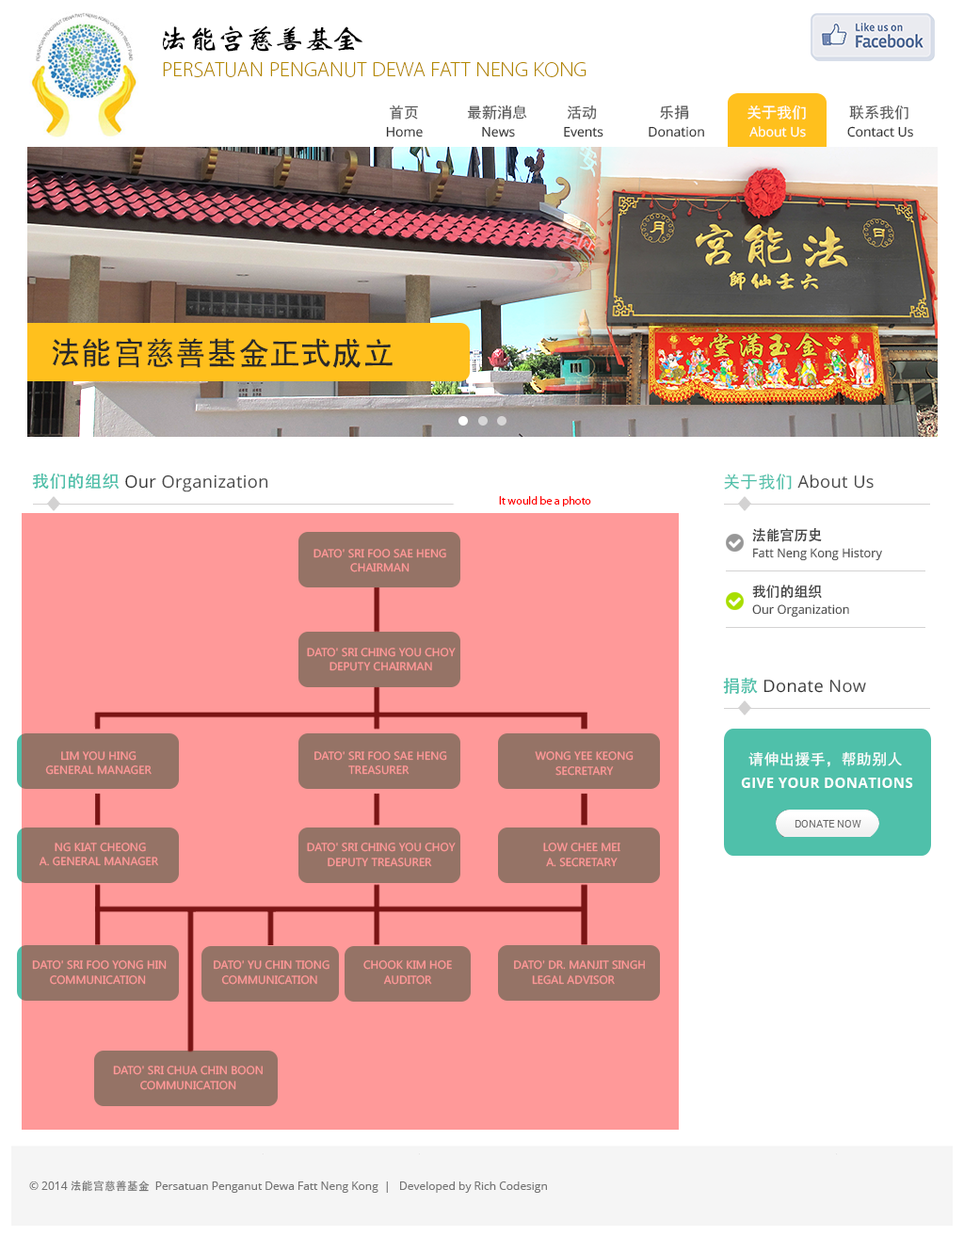
<style>
.page{position:relative;width:964px;height:1237px;background:#ffffff}
.page>*{position:absolute;margin:0}
.t1{font:29.1px "WeibeiCSEG??NÑ²ó??";letter-spacing:-0.05em;color:#000000;text-transform:uppercase;scale:1.04 1}
.t2{font:20.6px "Vegur-Light";color:#b38701;text-transform:uppercase;scale:1.03 1}
.t3{font:15.1px "SimHei";color:#5a5a5a}
.t4{font:15.1px "SimHei";color:#ffffff}
.t5{font:13.2px "OpenSans";color:#303030}
.t6{font:13.2px "OpenSans";color:#ffffff}
.t7{font:32.1px "MS-Hei";color:#292929}
.t8{font:16.9px "OpenSans";letter-spacing:0.025em;color:#474747}
.t9{font:16.9px "AdobeHeitiStd-Regular";letter-spacing:0.025em;color:#4fc0aa}
.t10{font:16.9px "OpenSans";letter-spacing:0.025em;color:#343434}
.t11{font:16.9px "SimHei";letter-spacing:0.025em;color:#4fc0aa}
.t12{font:11.3px "Myriad-Roman";color:#ff0000}
.t13{font:14.1px/56.5px "AdobeHeitiStd-Regular";color:#474747}
.t14{font:10.6px/14.6px "MicrosoftYaHei";color:#ff9999}
.t15{font:12.2px/56.5px "OpenSans";color:#474747}
.t16{font:15.1px "SimHei";letter-spacing:0.025em;color:#ffffff}
.t17{font:14.1px "OpenSans-Bold";letter-spacing:0.025em;color:#ffffff}
.t18{font:11.3px "OpenSans";color:#737373}
.t19{font:11.3px "MS-Hei";color:#737373}
</style>
<div class="page">
<p class="t1" style="left:163px;top:25px;width:199px;height:27px">法能宫慈善基金</p>
<p class="t2" style="left:163px;top:62px;width:423px;height:15px">PERSATUAN PENGANUT DEWA fatt neng kong</p>
<p class="t3" style="left:389px;top:104px;width:29px;height:16px">首页</p>
<p class="t3" style="left:467px;top:104px;width:60px;height:16px">最新消息</p>
<p class="t3" style="left:568px;top:105px;width:29px;height:15px">活动</p>
<p class="t3" style="left:660px;top:104px;width:29px;height:16px">乐捐</p>
<p class="t4" style="left:747px;top:104px;width:59px;height:16px">关于我们</p>
<p class="t3" style="left:849px;top:104px;width:59px;height:16px">联系我们</p>
<p class="t5" style="left:386px;top:126px;width:527px;height:11px">Home                 News              Events             Donation             <span class="t6">About Us </span>           Contact Us</p>
<p class="t7" style="left:52px;top:338px;width:341px;height:30px">法能宫慈善基金正式成立</p>
<p class="t8" style="left:32px;top:473px;width:236px;height:19px"><span class="t9">我们的组织</span><span class="t10"> Our </span>Organization</p>
<p class="t8" style="left:724px;top:474px;width:150px;height:16px"><span class="t11">关于我们 </span>About Us</p>
<p class="t12" style="left:499px;top:496px;width:92px;height:10px">It would be a photo</p>
<p class="t13" style="left:752px;top:528px;width:70px;height:71px">法能宫历史<br>我们的组织</p>
<p class="t14" style="left:313px;top:549px;width:133px;height:23px;text-align:center">DATO' SRI FOO SAE HENG<br>CHAIRMAN</p>
<p class="t15" style="left:752px;top:548px;width:130px;height:70px">Fatt Neng Kong History<br>Our Organization</p>
<p class="t14" style="left:307px;top:648px;width:149px;height:23px;text-align:center">DATO' SRI CHING YOU CHOY<br>DEPUTY CHAIRMAN</p>
<p class="t10" style="left:723px;top:677px;width:143px;height:17px"><span class="t9">捐款</span> Donate <span class="t8">Now</span></p>
<p class="t14" style="left:45px;top:751px;width:107px;height:24px;text-align:center">LIM YOU HING<br>GENERAL MANAGER</p>
<p class="t14" style="left:314px;top:751px;width:133px;height:24px;text-align:center">DATO' SRI FOO SAE HENG<br>TREASURER</p>
<p class="t14" style="left:535px;top:751px;width:99px;height:25px;text-align:center">WONG YEE KEONG<br>SECRETARY</p>
<p class="t16" style="left:748px;top:751px;width:154px;height:16px">请伸出援手，帮助别人</p>
<p class="t17" style="left:741px;top:778px;width:172px;height:10px">GIVE YOUR DONATIONS</p>
<p class="t14" style="left:39px;top:843px;width:119px;height:23px;text-align:center">NG KIAT CHEONG<br>A. GENERAL MANAGER</p>
<p class="t14" style="left:307px;top:843px;width:149px;height:24px;text-align:center">DATO' SRI CHING YOU CHOY<br>DEPUTY TREASURER</p>
<p class="t14" style="left:543px;top:843px;width:77px;height:24px;text-align:center">LOW CHEE MEI<br>A. SECRETARY</p>
<p class="t14" style="left:32px;top:960px;width:135px;height:25px;text-align:center">DATO' SRI FOO YONG HIN<br>COMMUNICATION</p>
<p class="t14" style="left:214px;top:960px;width:115px;height:25px;text-align:center">DATO' YU CHIN TIONG<br>COMMUNICATION</p>
<p class="t14" style="left:363px;top:960px;width:89px;height:25px;text-align:center">CHOOK KIM HOE<br>AUDITOR</p>
<p class="t14" style="left:514px;top:960px;width:131px;height:25px;text-align:center">DATO' DR. MANJIT SINGH<br>LEGAL ADVISOR</p>
<p class="t14" style="left:113px;top:1066px;width:150px;height:24px;text-align:center">DATO' SRI CHUA CHIN BOON<br>COMMUNICATION</p>
<p class="t18" style="left:29px;top:1181px;width:518px;height:12px">© 2014 <span class="t19">法能宫慈善基金 </span>Persatuan Penganut Dewa Fatt Neng Kong  |   Developed by Rich Codesign</p>
</div>
